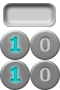
<style>
.page{position:relative;width:60px;height:90px;background:#ffffff}
.page>*{position:absolute;margin:0}
.t1{font:20px "Tahoma-Bold";color:#06cbce}
.t2{font:20px "Tahoma-Bold";color:#cccccc}
</style>
<div class="page">
<p class="t1" style="left:10px;top:36px;width:11px;height:16px">1</p>
<p class="t2" style="left:39px;top:36px;width:12px;height:16px">0</p>
<p class="t1" style="left:10px;top:66px;width:11px;height:16px">1</p>
<p class="t2" style="left:39px;top:66px;width:12px;height:16px">0</p>
</div>
